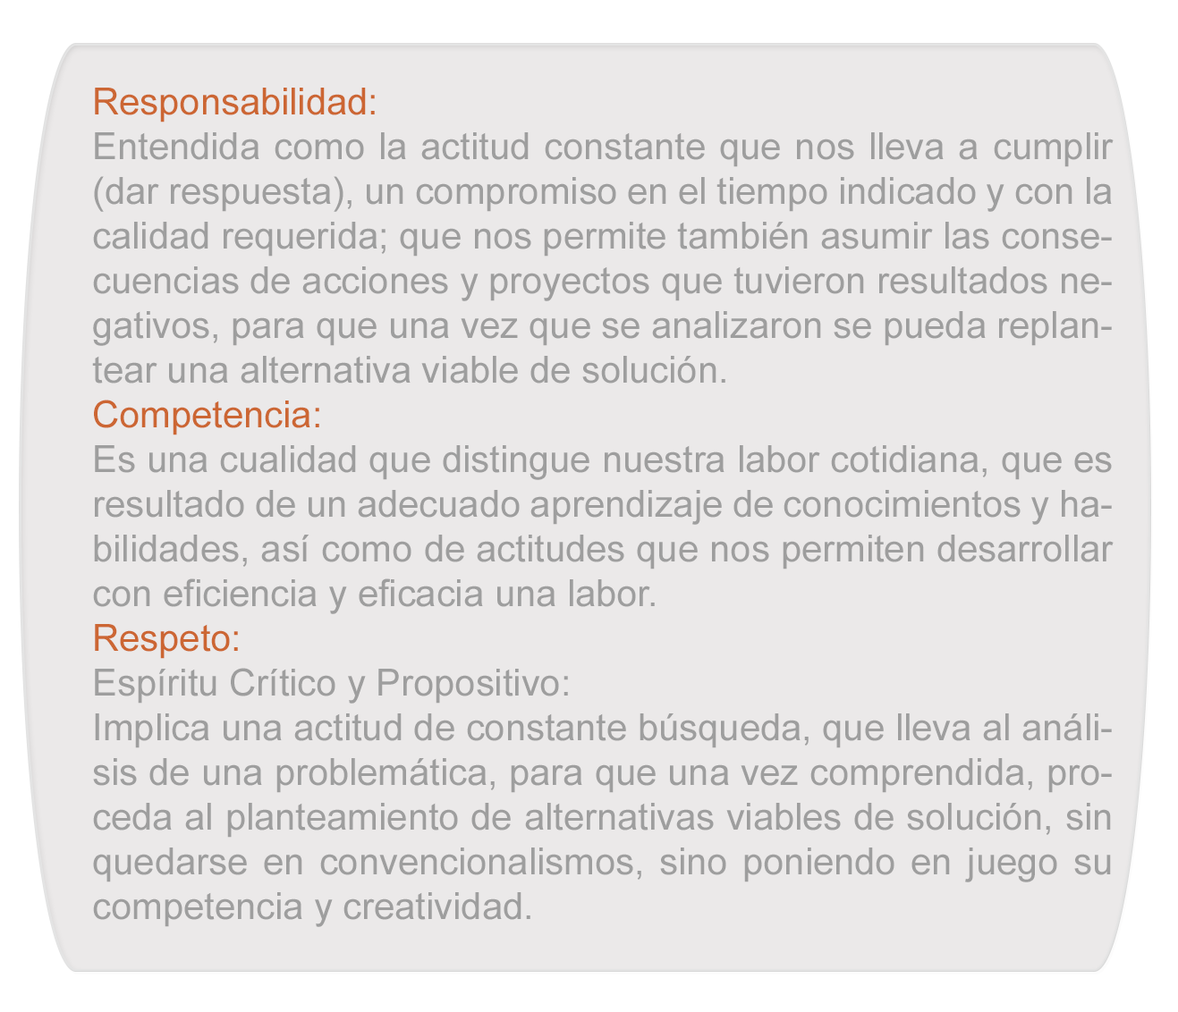
<style>
.page{position:relative;width:1178px;height:1012px;background:#ebe9e9}
.page>*{position:absolute;margin:0}
.t1{font:37.3px "ArialMT";color:#9e9e9e}
.t2{font:37.3px "ArialMT";color:#cc6633}
</style>
<div class="page">
<p class="t1" style="left:92px;top:88px;width:1021px;height:839px;text-align:justify"><span class="t2">Responsabilidad:<br></span>Entendida como la actitud constante que nos lleva a cumplir (dar respuesta), un compromiso en el tiempo indicado y con la calidad requerida; que nos permite también asumir las consecuencias de acciones y proyectos que tuvieron resultados negativos, para que una vez que se analizaron se pueda replantear una alternativa viable de solución.<br><span class="t2">Competencia:<br></span>Es una cualidad que distingue nuestra labor cotidiana, que es resultado de un adecuado aprendizaje de conocimientos y habilidades, así como de actitudes que nos permiten desarrollar con eficiencia y eficacia una labor. <br><span class="t2">Respeto:</span><br>Espíritu Crítico y Propositivo:<br>Implica una actitud de constante búsqueda, que lleva al análisis de una problemática, para que una vez comprendida, proceda al planteamiento de alternativas viables de solución, sin quedarse en convencionalismos, sino poniendo en juego su competencia y creatividad.</p>
</div>
